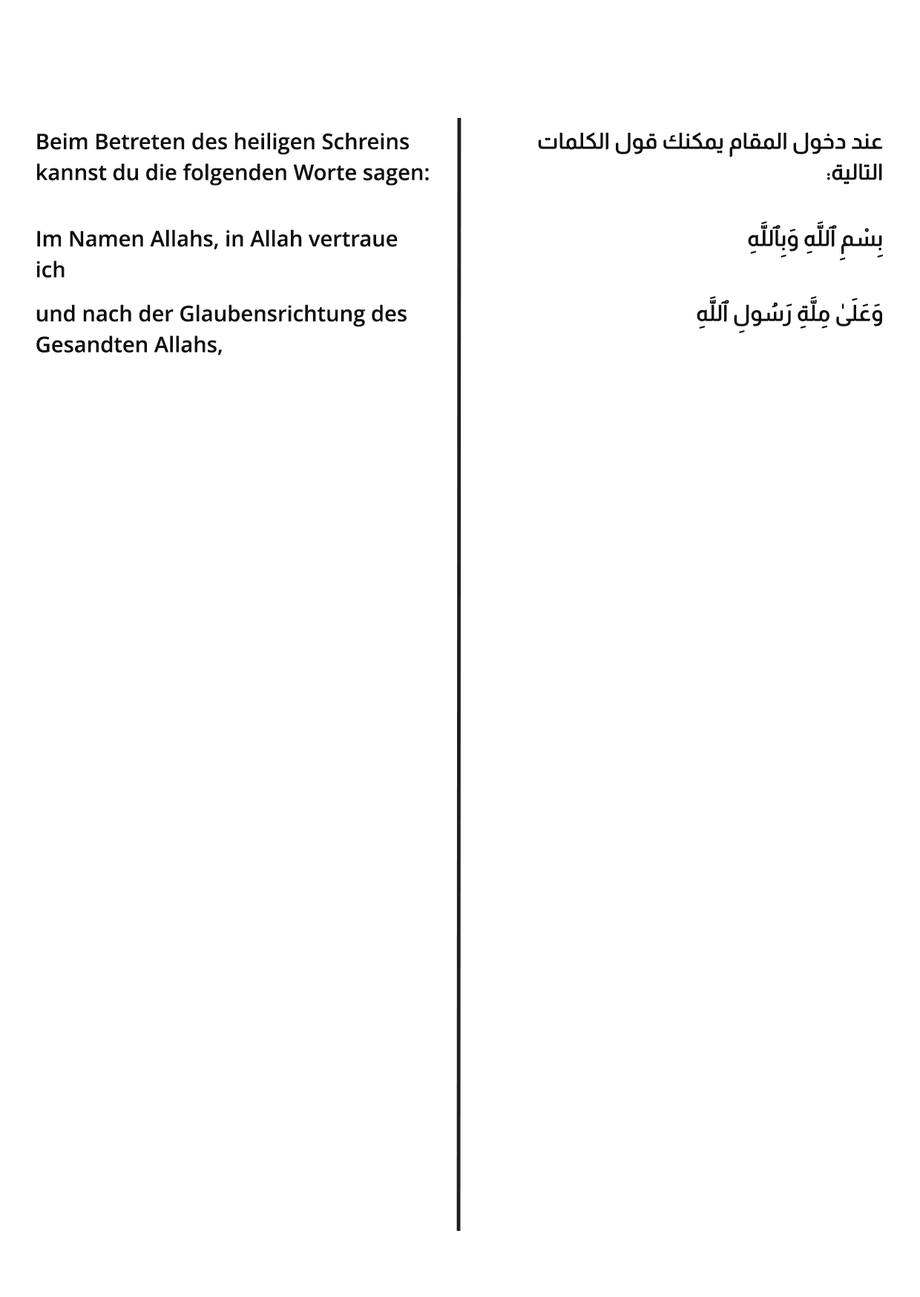
<style>
.page{position:relative;width:920px;height:1297px;background:#ffffff}
.page>*{position:absolute;margin:0}
.t1{font:21.6px/30.9px "OpenSans-Semibold";color:#0f0f0f}
.t2{font:21.6px/30.9px "BoutrosAsma";color:#0f0f0f;font-weight:bold}
</style>
<div class="page">
<p class="t1" style="left:37px;top:132px;width:392px;height:53px">Beim Betreten des heiligen Schreins kannst du die folgenden Worte sagen:</p>
<p class="t2" style="left:538px;top:132px;width:345px;height:53px">عند دخول المقام يمكنك قول الكلمات التالية:</p>
<p class="t2" style="left:748px;top:221px;width:135px;height:39px">بِسْمِ ٱللَّهِ وَبِٱللَّهِ</p>
<p class="t1" style="left:36px;top:229px;width:362px;height:49px">Im Namen Allahs, in Allah vertraue ich</p>
<p class="t1" style="left:36px;top:304px;width:370px;height:51px">und nach der Glaubensrichtung des Gesandten Allahs,</p>
<p class="t2" style="left:696px;top:296px;width:186px;height:37px">وَعَلَىٰ مِلَّةِ رَسُولِ ٱللَّهِ</p>
</div>
